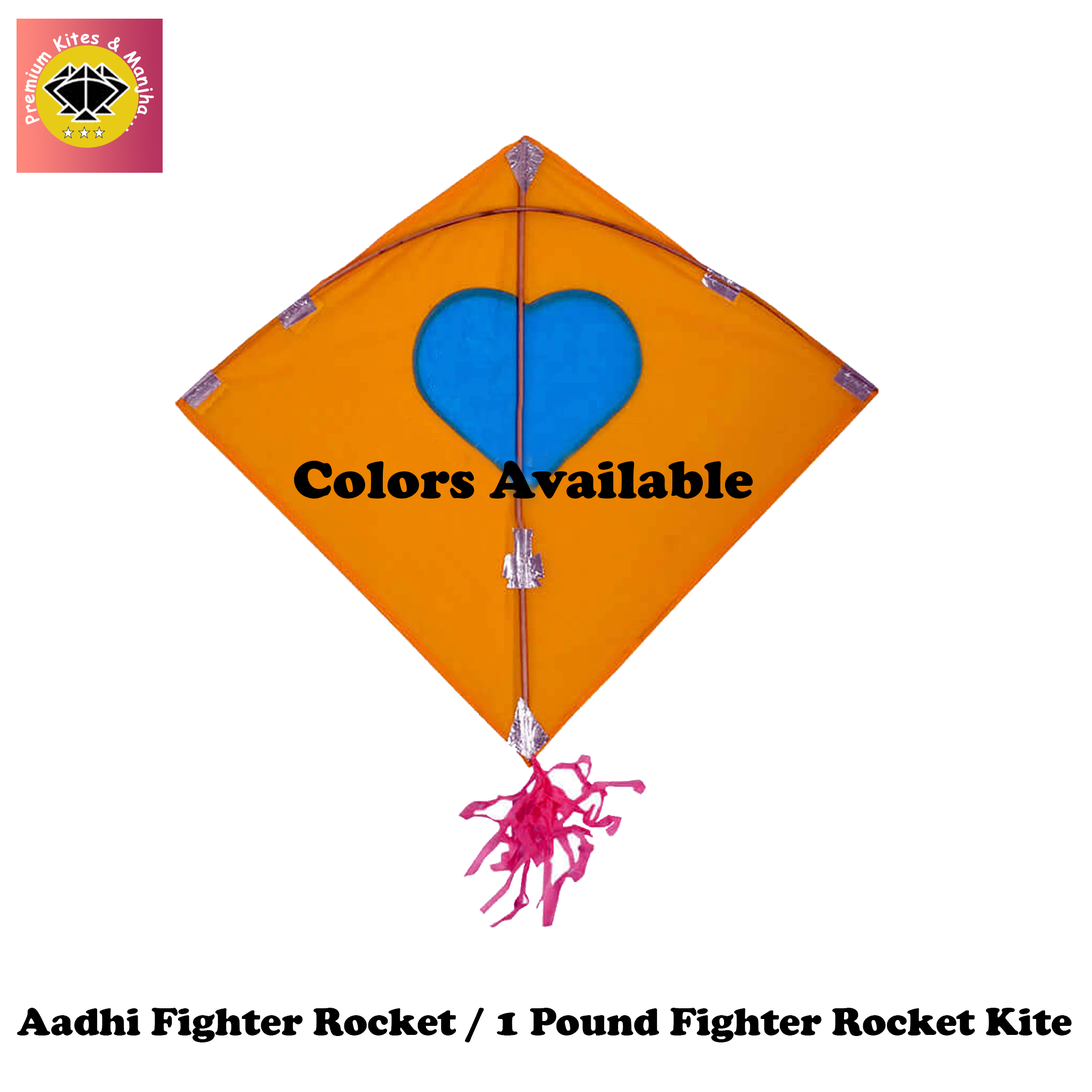
<style>
.page{position:relative;width:1092px;height:1092px;background:#ffffff}
.page>*{position:absolute;margin:0}
.t1{font:55.5px "CooperBlack";color:#000000}
.t2{font:40px "CooperBlack";color:#000000}
</style>
<div class="page">
<p class="t1" style="left:294px;top:461px;width:459px;height:38px">Colors Available</p>
<p class="t2" style="left:17px;top:1008px;width:1055px;height:34px">Aadhi Fighter Rocket / 1 Pound Fighter Rocket Kite</p>
</div>
